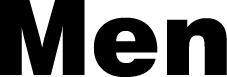
<style>
.page{position:relative;width:227px;height:77px;background:#000000}
.page>*{position:absolute;margin:0}
.t1{font:104.2px "Swiss721BT-Black";color:#000000}
</style>
<div class="page">
<p class="t1" style="left:0px;top:0px;width:227px;height:77px">Men</p>
</div>
